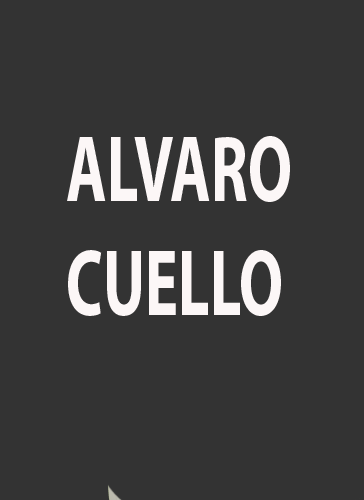
<style>
.page{position:relative;width:364px;height:500px;background:#333333}
.page>*{position:absolute;margin:0}
.t1{font:94.9px "MyriadPro-Bold";color:#fcf7f7;scale:0.65 1}
</style>
<div class="page">
<p class="t1" style="left:67px;top:136px;width:223px;height:180px">ALVARO <br>CUELLO</p>
</div>
